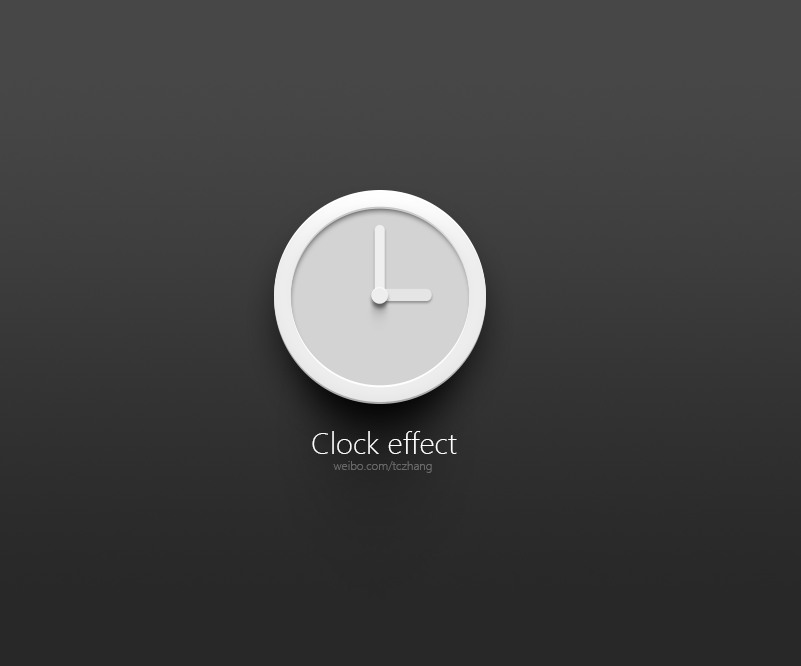
<style>
.page{position:relative;width:801px;height:666px}
.page>*{position:absolute;margin:0}
.t1{font:30px "SegoeUI-Light";color:#ffffff}
.t2{font:12px "SegoeUI-Light";color:#676767}
</style>
<div class="page">
<p class="t1" style="left:312px;top:431px;width:145px;height:23px">Clock effect</p>
<p class="t2" style="left:333px;top:461px;width:99px;height:12px">weibo.com/tczhang</p>
</div>
